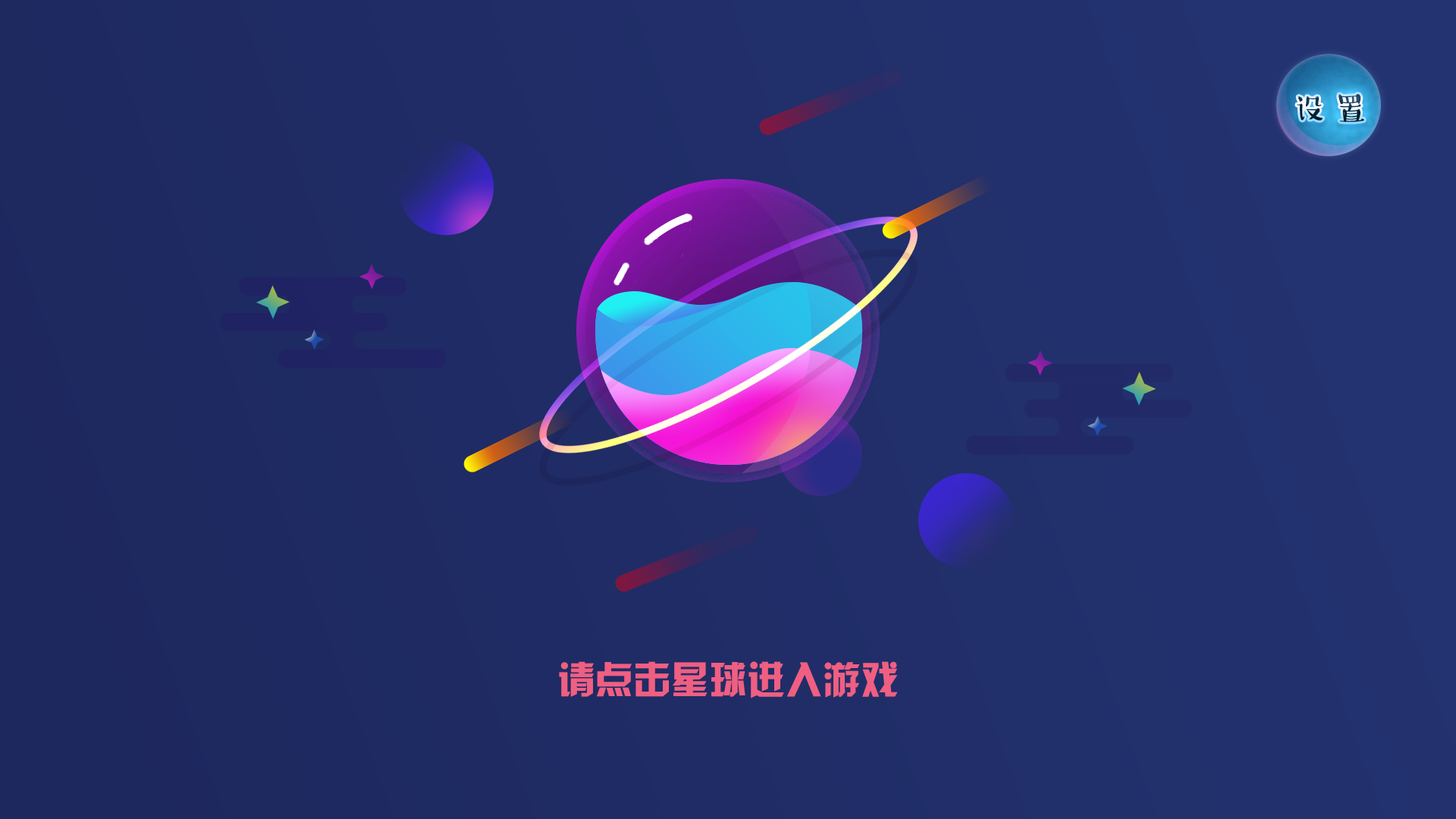
<style>
.page{position:relative;width:1456px;height:819px}
.page>*{position:absolute;margin:0}
.t1{font:31px "HYXiaoMaiTiJ"}
.t2{font:37.9px "HYk2gj";color:#ef5f82}
</style>
<div class="page">
<p class="t1" style="left:1296px;top:93px;width:68px;height:30px">设 置</p>
<p class="t1" style="left:1297px;top:94px;width:67px;height:28px">设 置</p>
<p class="t2" style="left:559px;top:661px;width:339px;height:37px">请点击星球进入游戏</p>
</div>
